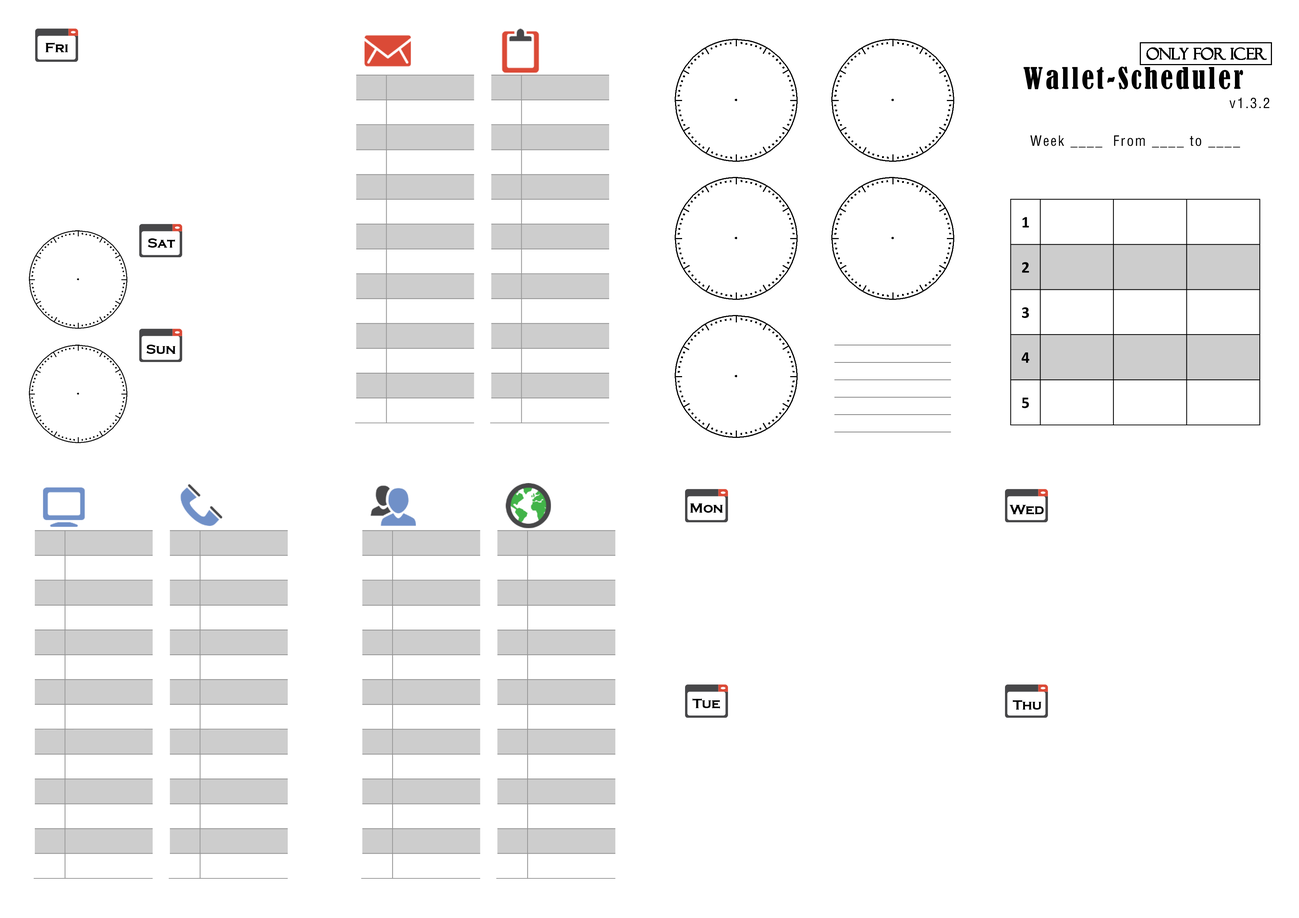
<style>
.page{position:relative;width:1299px;height:918px;background:#ffffff}
.page>*{position:absolute;margin:0}
.t1{font:13.9px "CopperplateGothic-Bold";color:#000000}
.t2{font:15.4px "FelixTitlingMT";color:#000000}
.t3{font:27.8px "BernardMT-Condensed";letter-spacing:0.097em;color:#000000}
.t4{font:13.9px "FZYTK--GBK1-0";letter-spacing:0.097em;color:#000000}
</style>
<div class="page">
<p class="t1" style="left:46px;top:43px;width:22px;height:9px">Fri</p>
<p class="t2" style="left:1147px;top:48px;width:119px;height:12px">Only for Icer</p>
<p class="t3" style="left:1023px;top:67px;width:220px;height:22px">Wallet-Scheduler</p>
<p class="t4" style="left:1229px;top:97px;width:40px;height:11px">v1.3.2</p>
<p class="t4" style="left:1030px;top:135px;width:210px;height:13px">Week ____  From ____ to ____</p>
<p class="t1" style="left:148px;top:238px;width:27px;height:10px">Sat</p>
<p class="t1" style="left:146px;top:345px;width:29px;height:9px">Sun</p>
<p class="t1" style="left:690px;top:504px;width:33px;height:9px">Mon</p>
<p class="t1" style="left:1009px;top:505px;width:35px;height:10px">Wed</p>
<p class="t1" style="left:692px;top:699px;width:28px;height:10px">Tue</p>
<p class="t1" style="left:1013px;top:700px;width:28px;height:10px">Thu</p>
</div>
